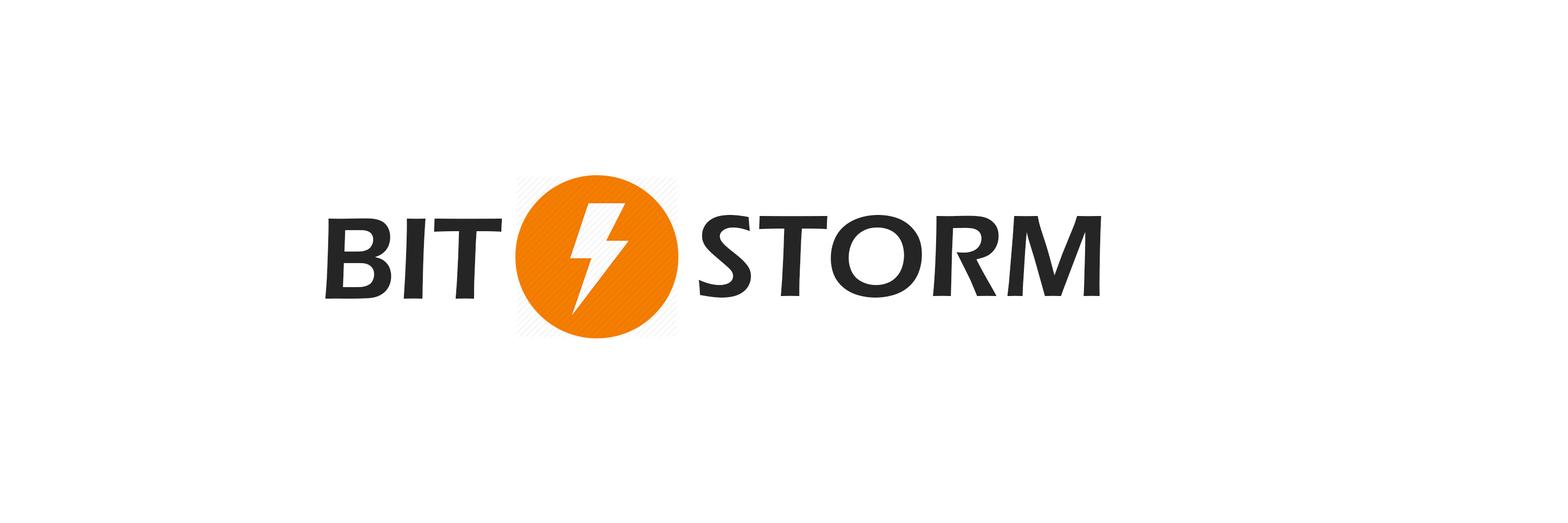
<style>
.page{position:relative;width:1568px;height:523px;background:#ffffff}
.page>*{position:absolute;margin:0}
.t1{font:119.8px "ErasITC-Demi";color:#252525}
</style>
<div class="page">
<p class="t1" style="left:325px;top:218px;width:177px;height:80px">BIT</p>
<p class="t1" style="left:698px;top:215px;width:403px;height:82px">STORM</p>
</div>
